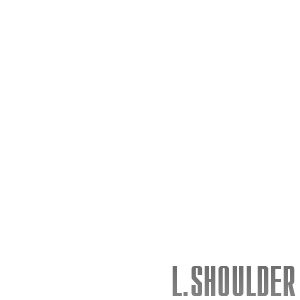
<style>
.page{position:relative;width:300px;height:300px;background:#ffffff}
.page>*{position:absolute;margin:0}
.t1{font:36px "Compact";color:#787878}
</style>
<div class="page">
<p class="t1" style="left:172px;top:266px;width:124px;height:30px">L.SHOULDER</p>
</div>
